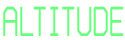
<style>
.page{position:relative;width:125px;height:40px;background:#ffffff}
.page>*{position:absolute;margin:0}
.t1{font:41.7px "HornetDisplay-Bold";color:#67ff7b;scale:0.71 1}
</style>
<div class="page">
<p class="t1" style="left:3px;top:6px;width:121px;height:30px">ALTITUDE</p>
</div>
